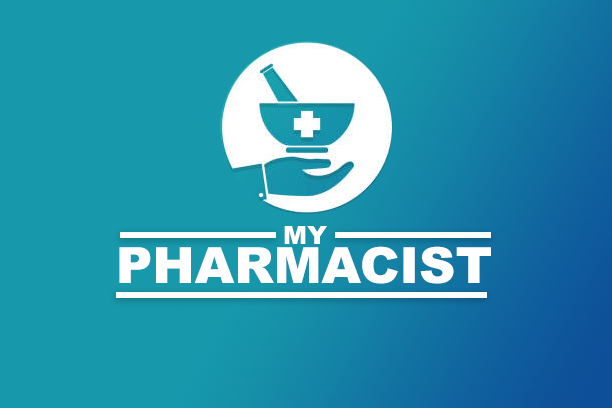
<style>
.page{position:relative;width:612px;height:408px;background:#1798ab}
.page>*{position:absolute;margin:0}
.t1{font:25px "Arial-Black";letter-spacing:-0.005em;color:#ffffff}
.t2{font:50px "Arial-Black";letter-spacing:-0.005em;color:#ffffff}
</style>
<div class="page">
<p class="t1" style="left:284px;top:226px;width:43px;height:18px">MY</p>
<p class="t2" style="left:119px;top:246px;width:372px;height:38px">PHARMACIST</p>
</div>
